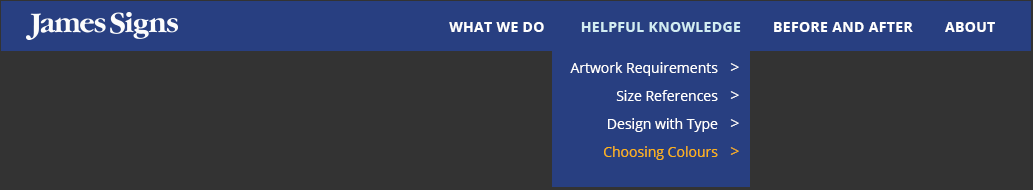
<style>
.page{position:relative;width:1033px;height:190px;background:#333333}
.page>*{position:absolute;margin:0}
.t1{font:14px "OpenSans-Bold";letter-spacing:0.025em;color:#ffffff}
.t2{font:14px "OpenSans-Bold";letter-spacing:0.025em;color:#d2edf3}
.t3{font:14px/28px "OpenSans";color:#ffffff}
.t4{font:16px/28px "OpenSans";color:#ffffff}
.t5{font:14px/28px "OpenSans";color:#fcb315}
.t6{font:16px/28px "OpenSans";color:#fcb315}
</style>
<div class="page">
<p class="t1" style="left:449px;top:22px;width:546px;height:10px">WHAT WE DO         <span class="t2">HELPFUL KNOWLEDGE</span>        BEFORE AND AFTER        ABOUT</p>
<p class="t3" style="left:570px;top:62px;width:169px;height:98px;text-align:right">Artwork Requirements   <span class="t4">&gt;<br></span>Size References   <span class="t4">&gt;<br></span>Design with Type   <span class="t4">&gt;<br></span><span class="t5">Choosing Colours   </span><span class="t6">&gt;</span></p>
</div>
